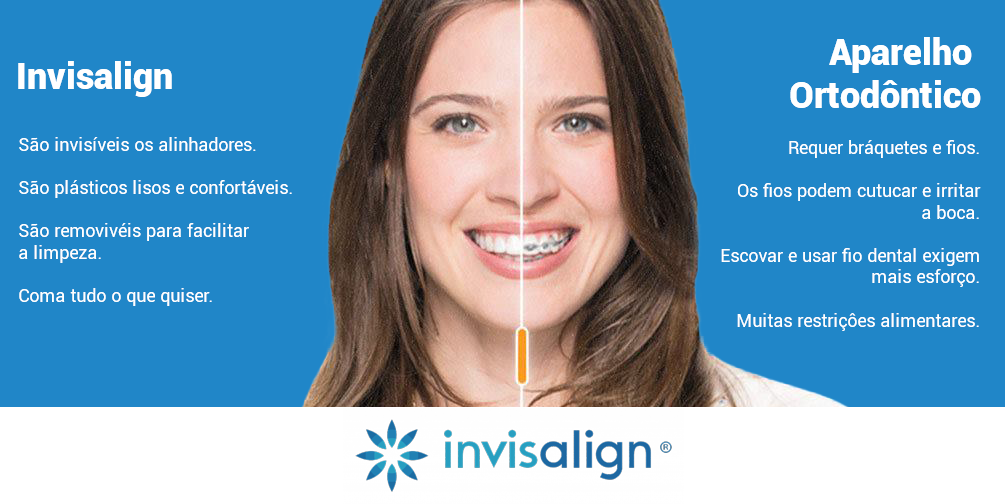
<style>
.page{position:relative;width:1005px;height:504px;background:#2086c8}
.page>*{position:absolute;margin:0}
.t1{font:36px "Roboto-Black";color:#ffffff}
.t2{font:18px "Roboto-Regular";color:#ffffff}
</style>
<div class="page">
<p class="t1" style="left:790px;top:37px;width:191px;height:71px;text-align:right">Aparelho <br>Ortodôntico</p>
<p class="t1" style="left:18px;top:61px;width:154px;height:36px">Invisalign</p>
<p class="t2" style="left:19px;top:137px;width:273px;height:169px">São invisíveis os alinhadores.<br><br>São plásticos lisos e confortáveis.<br><br>São removivéis para facilitar <br>a limpeza.<br><br>Coma tudo o que quiser.</p>
<p class="t2" style="left:721px;top:140px;width:260px;height:191px;text-align:right">Requer bráquetes e fios.<br><br>Os fios podem cutucar e irritar <br>a boca.<br><br>Escovar e usar fio dental exigem mais esforço.<br><br>Muitas restriçôes alimentares.</p>
</div>
